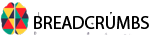
<style>
.page{position:relative;width:150px;height:38px;background:#ffffff}
.page>*{position:absolute;margin:0}
.t1{font:18px "MyriadHebrew-Regular";color:#000000}
</style>
<div class="page">
<p class="t1" style="left:34px;top:16px;width:115px;height:13px">BREADCRUMBS</p>
</div>
